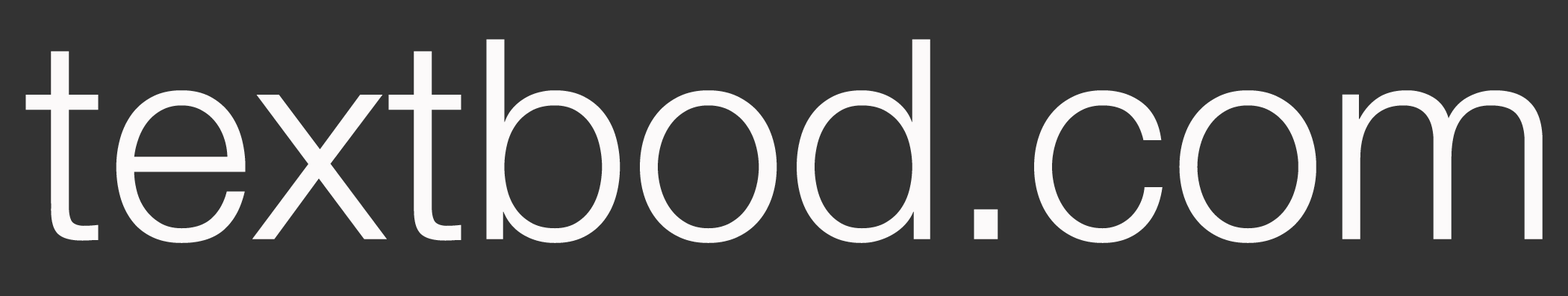
<style>
.page{position:relative;width:1568px;height:296px;background:#333333}
.page>*{position:absolute;margin:0}
.t1{font:280px "HelveticaNeue-Light";color:#fcfafa}
</style>
<div class="page">
<p class="t1" style="left:25px;top:39px;width:1518px;height:204px">textbod.com</p>
</div>
